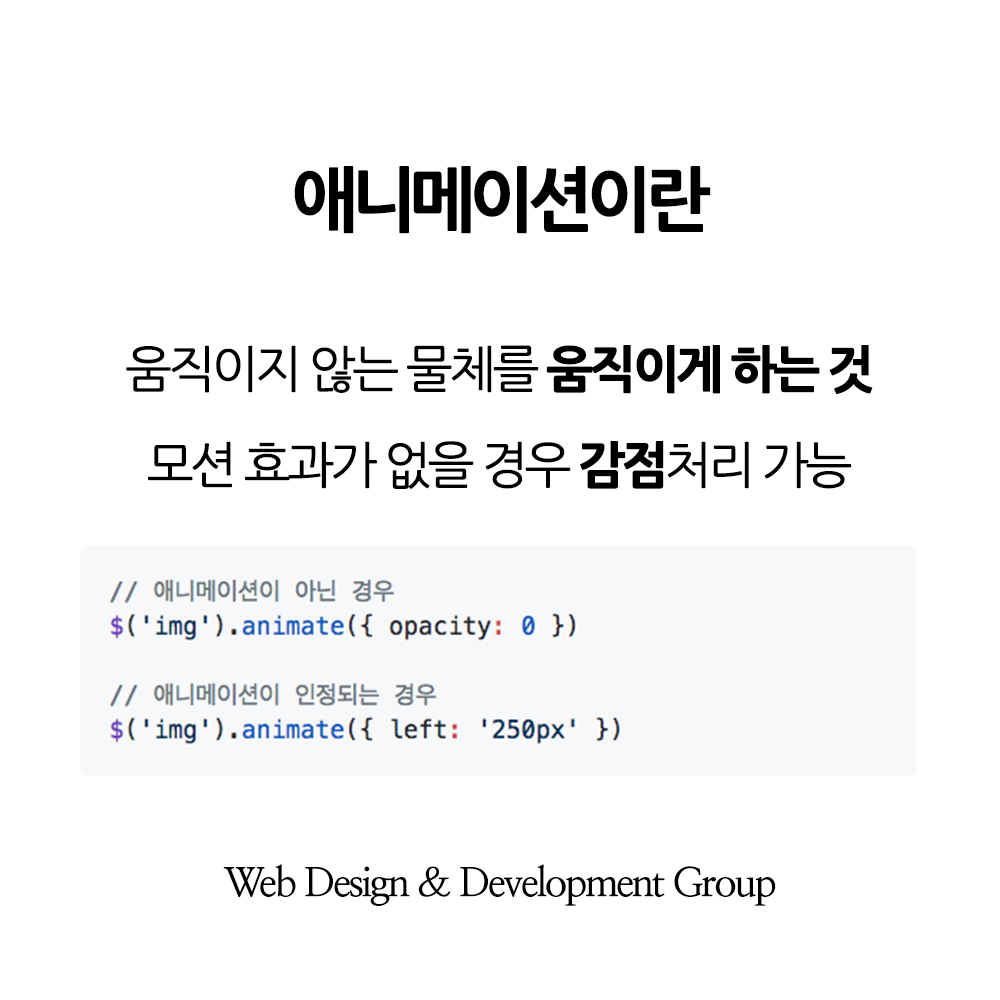
<style>
.page{position:relative;width:1000px;height:1000px;background:#ffffff}
.page>*{position:absolute;margin:0}
.t1{font:70px "NanumGothicExtraBold";letter-spacing:-0.1em;color:#000000}
.t2{font:50px/96px "NanumGothic";letter-spacing:-0.1em;color:#000000;font-weight:bold}
.t3{font:50px/96px "NanumGothicExtraBold";letter-spacing:-0.1em;color:#000000;font-weight:bold}
.t4{font:40px "NanumMyeongjoBold";letter-spacing:-0.06em;color:#000000}
</style>
<div class="page">
<p class="t1" style="left:294px;top:166px;width:417px;height:68px">애니메이션이란</p>
<p class="t2" style="left:126px;top:345px;width:747px;height:144px;text-align:center">움직이지 않는 물체를 <span class="t3">움직이게 하는 것<br></span>모션 효과가 없을 경우 <span class="t3">감점</span>처리 가능</p>
<p class="t4" style="left:223px;top:864px;width:553px;height:42px">Web Design &amp; Development Group</p>
</div>
